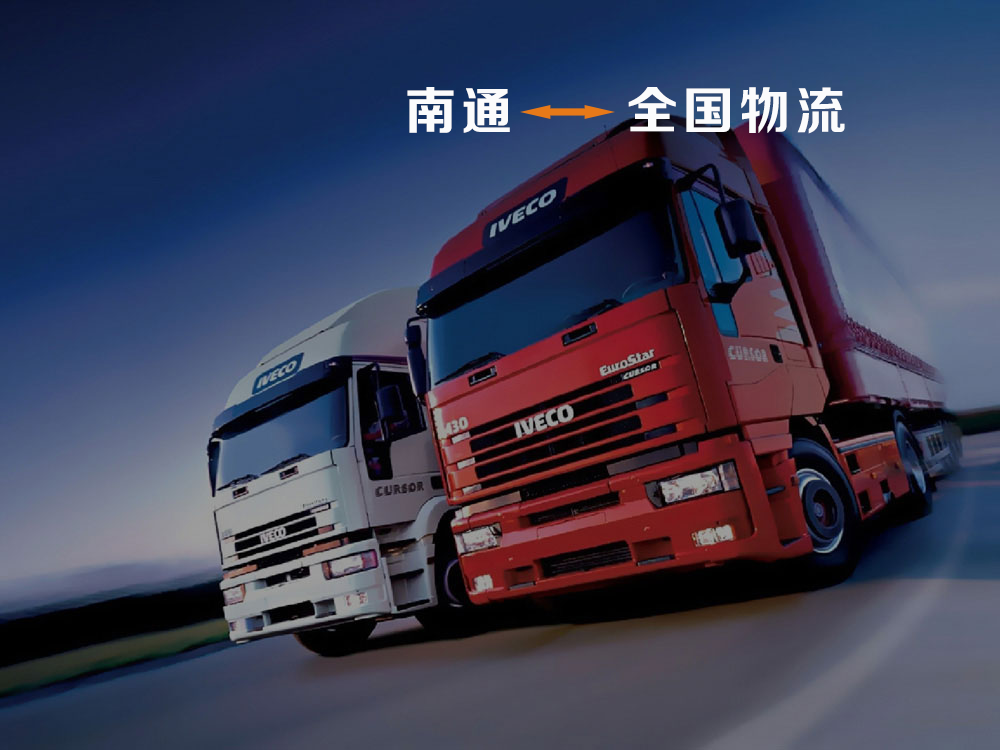
<style>
.page{position:relative;width:1000px;height:750px}
.page>*{position:absolute;margin:0}
.t1{font:50.9px "FZZCHJW--GB1-0";letter-spacing:0.1em;color:#fbfbfc}
</style>
<div class="page">
<p class="t1" style="left:407px;top:87px;width:438px;height:47px">南通     全国物流</p>
</div>
